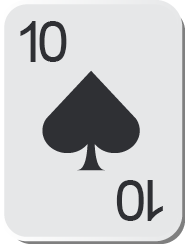
<style>
.page{position:relative;width:185px;height:244px;background:#e6e7e8}
.page>*{position:absolute;margin:0}
.t1{font:58.3px "ArialMT";letter-spacing:-0.16em;color:#2f3034}
</style>
<div class="page">
<p class="t1" style="left:20px;top:21px;width:47px;height:41px">10</p>
<p class="t1" style="left:116px;top:180px;width:47px;height:41px;rotate:180deg">10</p>
</div>
